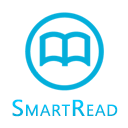
<style>
.page{position:relative;width:128px;height:128px;background:#ffffff}
.page>*{position:absolute;margin:0}
.t1{font:23px "Ebrima";letter-spacing:0.025em;color:#04aeda;font-variant:small-caps;font-weight:bold}
</style>
<div class="page">
<p class="t1" style="left:12px;top:99px;width:106px;height:18px">SmartRead</p>
</div>
